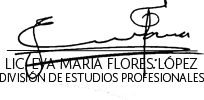
<style>
.page{position:relative;width:204px;height:100px;background:#ffffff}
.page>*{position:absolute;margin:0}
.t1{font:13.9px "SoberanaSans-Light";color:#100f10}
.t2{font:11.1px "SoberanaSans-Light";color:#100f10}
</style>
<div class="page">
<p class="t1" style="left:6px;top:56px;width:192px;height:13px">LIC. EVA MARÍA FLORES LÓPEZ</p>
<p class="t2" style="left:0px;top:71px;width:205px;height:11px">DIVISIÓN DE ESTUDIOS PROFESIONALES</p>
</div>
